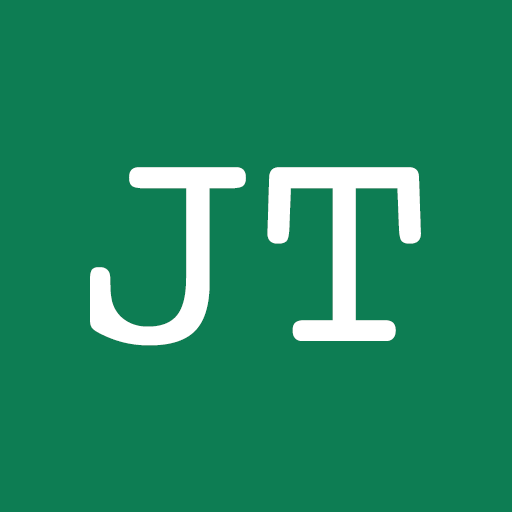
<style>
.page{position:relative;width:512px;height:512px;background:#0d7d53}
.page>*{position:absolute;margin:0}
.t1{font:300px "Courier";color:#ffffff}
</style>
<div class="page">
<p class="t1" style="left:90px;top:167px;width:331px;height:179px">JT</p>
</div>
